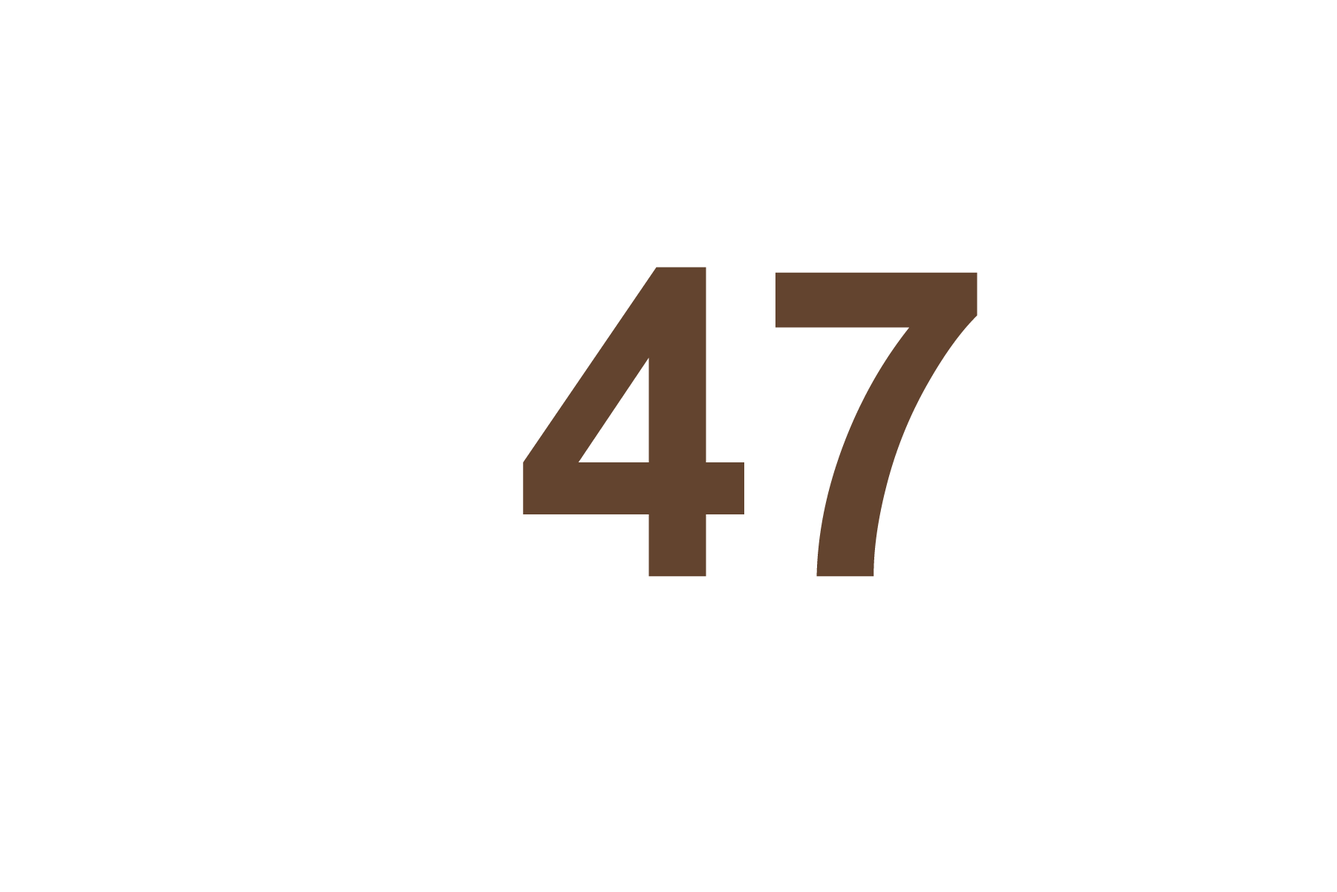
<style>
.page{position:relative;width:1337px;height:892px;background:#ffffff}
.page>*{position:absolute;margin:0}
.t1{font:429.6px "Arial-BoldMT";color:#63442f}
</style>
<div class="page">
<p class="t1" style="left:523px;top:267px;width:455px;height:310px">47</p>
</div>
